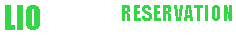
<style>
.page{position:relative;width:236px;height:35px;background:#ffffff}
.page>*{position:absolute;margin:0}
.t1{font:30px "Impact";color:#fdfefd}
.t2{font:30px "Impact";color:#35d547}
.t3{font:19.8px "Impact";color:#35d547;scale:1.08 1}
</style>
<div class="page">
<p class="t1" style="left:5px;top:5px;width:113px;height:25px"><span class="t2">LIO </span>ROOM</p>
<p class="t3" style="left:122px;top:5px;width:110px;height:16px">RESERVATION</p>
</div>
